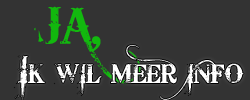
<style>
.page{position:relative;width:250px;height:100px;background:#333333}
.page>*{position:absolute;margin:0}
.t1{font:50px "BleedingCowboys";color:#12b80e;font-variant:small-caps}
.t2{font:37.5px "BleedingCowboys";color:#ffffff;font-variant:small-caps}
</style>
<div class="page">
<p class="t1" style="left:34px;top:6px;width:107px;height:78px">JA,</p>
<p class="t2" style="left:14px;top:45px;width:230px;height:57px">Ik wil meer info</p>
</div>
